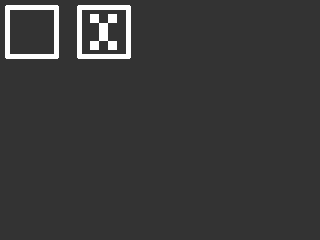
<style>
.page{position:relative;width:320px;height:240px;background:#333333}
.page>*{position:absolute;margin:0}
.t1{font:72px "04b03";color:#ffffff}
</style>
<div class="page">
<p class="t1" style="left:90px;top:14px;width:27px;height:36px">x</p>
</div>
